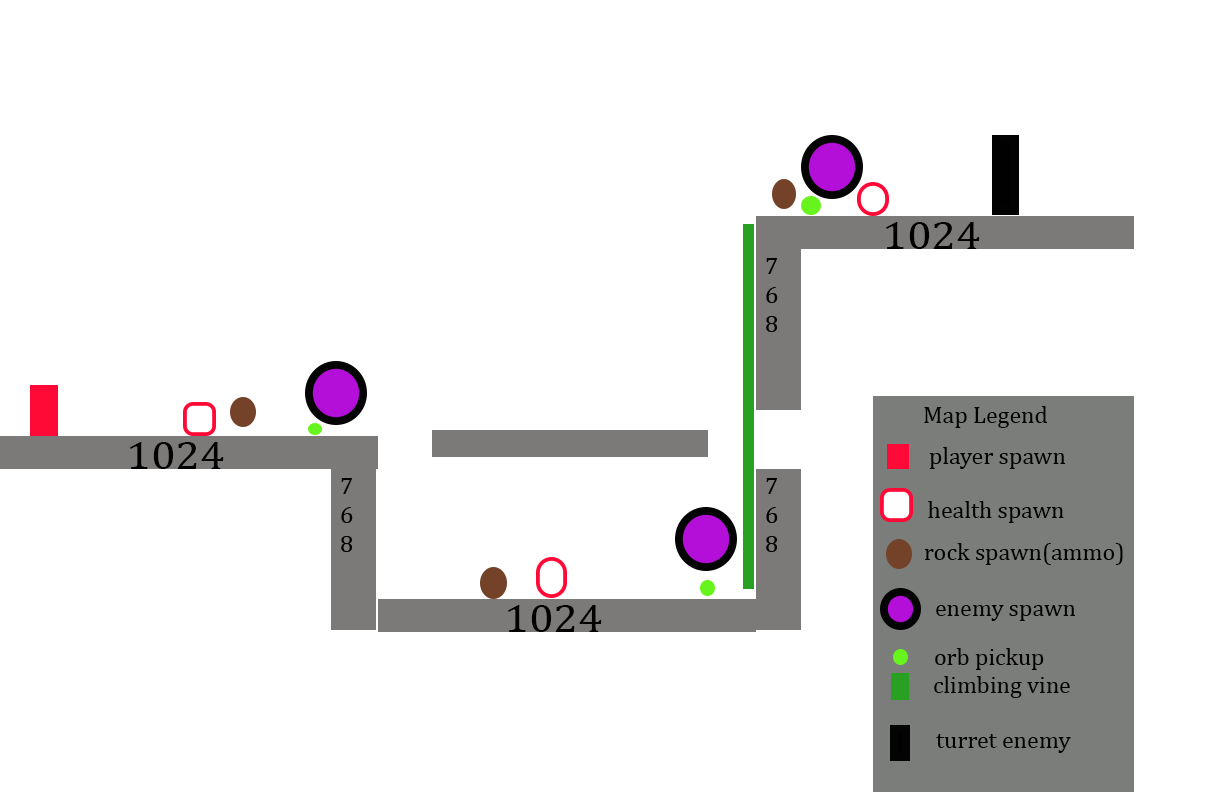
<style>
.page{position:relative;width:1224px;height:792px;background:#ffffff}
.page>*{position:absolute;margin:0}
.t1{font:24px "Cambria";color:#000000}
</style>
<div class="page">
<p class="t1" style="left:924px;top:406px;width:124px;height:22px">Map Legend</p>
<p class="t1" style="left:929px;top:447px;width:137px;height:22px">player spawn</p>
<p class="t1" style="left:928px;top:501px;width:136px;height:22px">health spawn</p>
<p class="t1" style="left:924px;top:543px;width:199px;height:22px">rock spawn(ammo)</p>
<p class="t1" style="left:936px;top:605px;width:140px;height:16px">enemy spawn</p>
<p class="t1" style="left:935px;top:648px;width:109px;height:22px">orb pickup</p>
<p class="t1" style="left:934px;top:676px;width:136px;height:22px">climbing vine</p>
<p class="t1" style="left:936px;top:734px;width:135px;height:19px">turret enemy</p>
</div>
